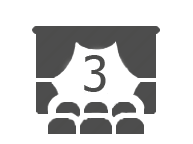
<style>
.page{position:relative;width:193px;height:144px;background:#ffffff}
.page>*{position:absolute;margin:0}
.t1{font:48px "Tahoma";color:#4c4c4b}
</style>
<div class="page">
<p class="t1" style="left:84px;top:55px;width:22px;height:37px">3</p>
</div>
